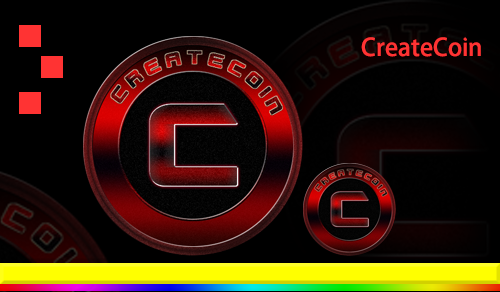
<style>
.page{position:relative;width:500px;height:292px;background:#000000}
.page>*{position:absolute;margin:0}
.t1{font:24px "AdobeHeitiStd-Regular";color:#ff3333}
</style>
<div class="page">
<p class="t1" style="left:361px;top:37px;width:120px;height:20px">CreateCoin</p>
</div>
